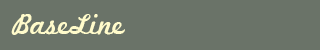
<style>
.page{position:relative;width:320px;height:50px;background:#6a7368}
.page>*{position:absolute;margin:0}
.t1{font:30px "MarketingScript";color:#fffbcb}
</style>
<div class="page">
<p class="t1" style="left:11px;top:14px;width:114px;height:21px">BaseLine</p>
</div>
